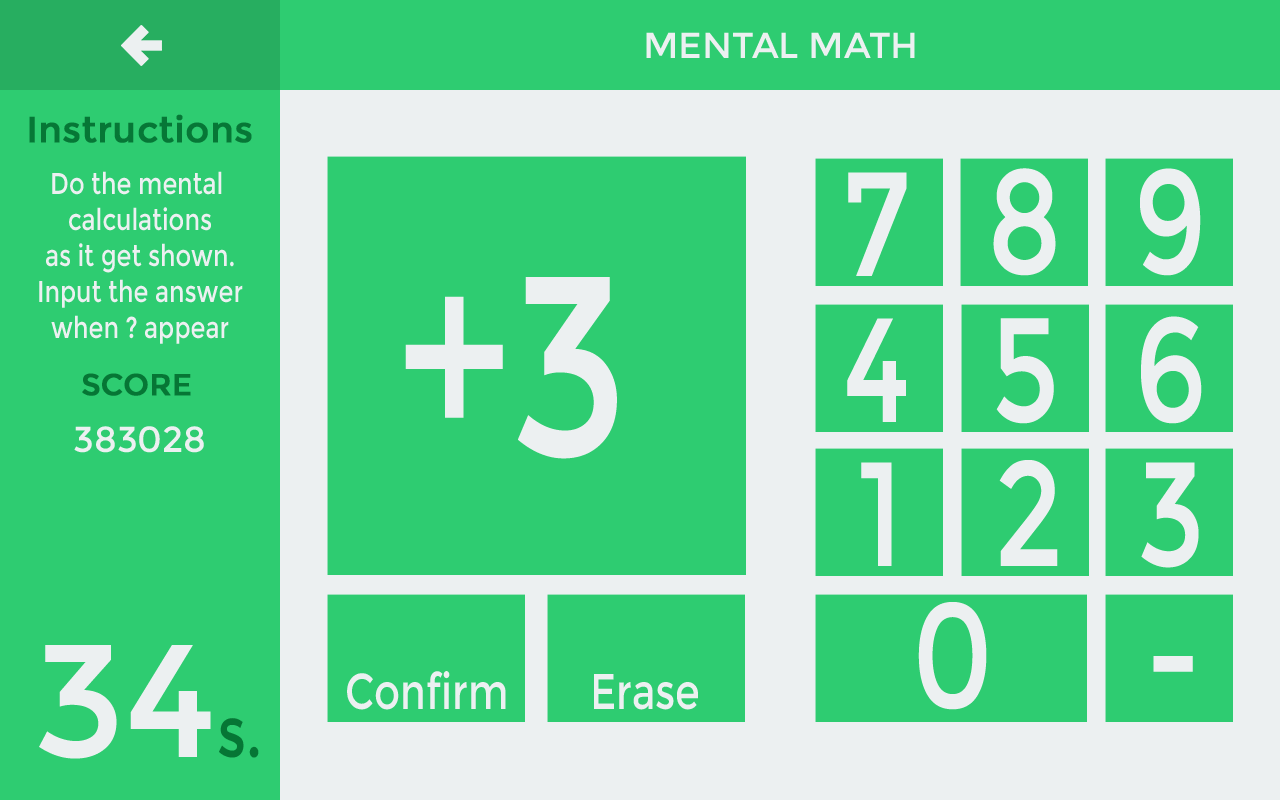
<style>
.page{position:relative;width:1280px;height:800px;background:#2ecc71}
.page>*{position:absolute;margin:0}
.t1{font:36px "Montserrat-Regular";color:#ecf0f1}
.t2{font:36px "Montserrat-Regular";color:#067736;font-weight:bold}
.t3{font:30px "Montserrat-Regular";color:#ecf0f1;scale:0.8 1}
.t4{font:148px "Montserrat-Regular";color:#ecf0f1;scale:0.8 1}
.t5{font:256px "Montserrat-Regular";color:#ecf0f1;scale:0.8 1}
.t6{font:30px "Montserrat-Regular";color:#067635;font-weight:bold}
.t7{font:160px "Montserrat-Regular";color:#ecf0f1}
.t8{font:50px "Montserrat-Regular";color:#ecf0f1;scale:0.8 1}
.t9{font:72px "Montserrat-Regular";color:#067635;scale:0.8 1}
</style>
<div class="page">
<p class="t1" style="left:646px;top:32px;width:269px;height:26px">MENTAL MATH</p>
<p class="t2" style="left:29px;top:114px;width:223px;height:29px">Instructions</p>
<p class="t3" style="left:39px;top:171px;width:204px;height:173px;text-align:center">Do the mental <br>calculations<br>as it get shown.<br>Input the answer<br>when ? appear</p>
<p class="t4" style="left:848px;top:172px;width:59px;height:104px">7</p>
<p class="t4" style="left:993px;top:168px;width:63px;height:108px">8</p>
<p class="t4" style="left:1140px;top:168px;width:61px;height:108px">9</p>
<p class="t5" style="left:405px;top:277px;width:212px;height:182px">+3</p>
<p class="t4" style="left:847px;top:318px;width:59px;height:104px">4</p>
<p class="t4" style="left:996px;top:318px;width:58px;height:106px">5</p>
<p class="t4" style="left:1141px;top:316px;width:61px;height:108px">6</p>
<p class="t6" style="left:82px;top:373px;width:109px;height:23px">SCORE</p>
<p class="t1" style="left:74px;top:426px;width:130px;height:27px">383028</p>
<p class="t4" style="left:861px;top:462px;width:31px;height:104px">1</p>
<p class="t4" style="left:999px;top:460px;width:59px;height:106px">2</p>
<p class="t4" style="left:1141px;top:462px;width:58px;height:106px">3</p>
<p class="t4" style="left:918px;top:602px;width:69px;height:108px">0</p>
<p class="t7" style="left:39px;top:645px;width:172px;height:114px">34</p>
<p class="t4" style="left:1153px;top:656px;width:40px;height:16px">-</p>
<p class="t8" style="left:347px;top:671px;width:159px;height:39px">Confirm</p>
<p class="t8" style="left:594px;top:674px;width:104px;height:36px">Erase</p>
<p class="t9" style="left:219px;top:718px;width:40px;height:40px">s.</p>
</div>
